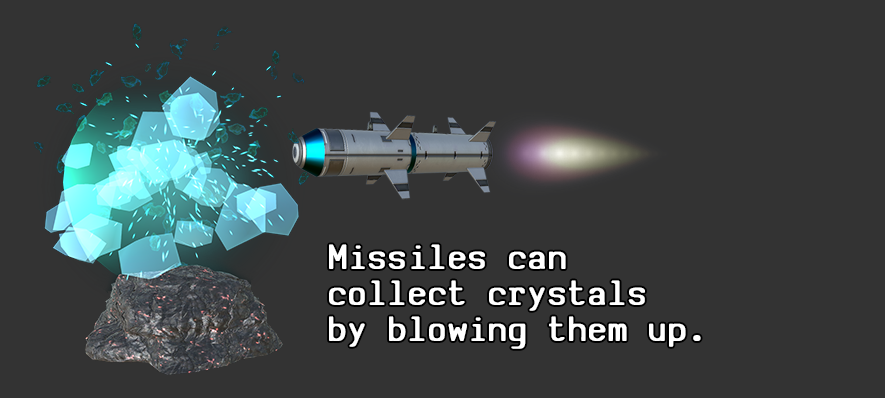
<style>
.page{position:relative;width:885px;height:398px;background:#333333}
.page>*{position:absolute;margin:0}
.t1{font:37.8px/36px "SVBasicManual-Bold";letter-spacing:0.05em;color:#ffffff;scale:0.95 1}
</style>
<div class="page">
<p class="t1" style="left:329px;top:244px;width:372px;height:105px">Missiles can <br>collect crystals <br>by blowing them up.</p>
</div>
